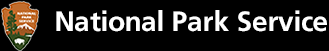
<style>
.page{position:relative;width:329px;height:51px;background:#000000}
.page>*{position:absolute;margin:0}
.t1{font:28px "FrutigerLTStd-Bold";letter-spacing:-0.016em;color:#ffffff}
</style>
<div class="page">
<p class="t1" style="left:56px;top:10px;width:271px;height:22px">National Park Service</p>
</div>
